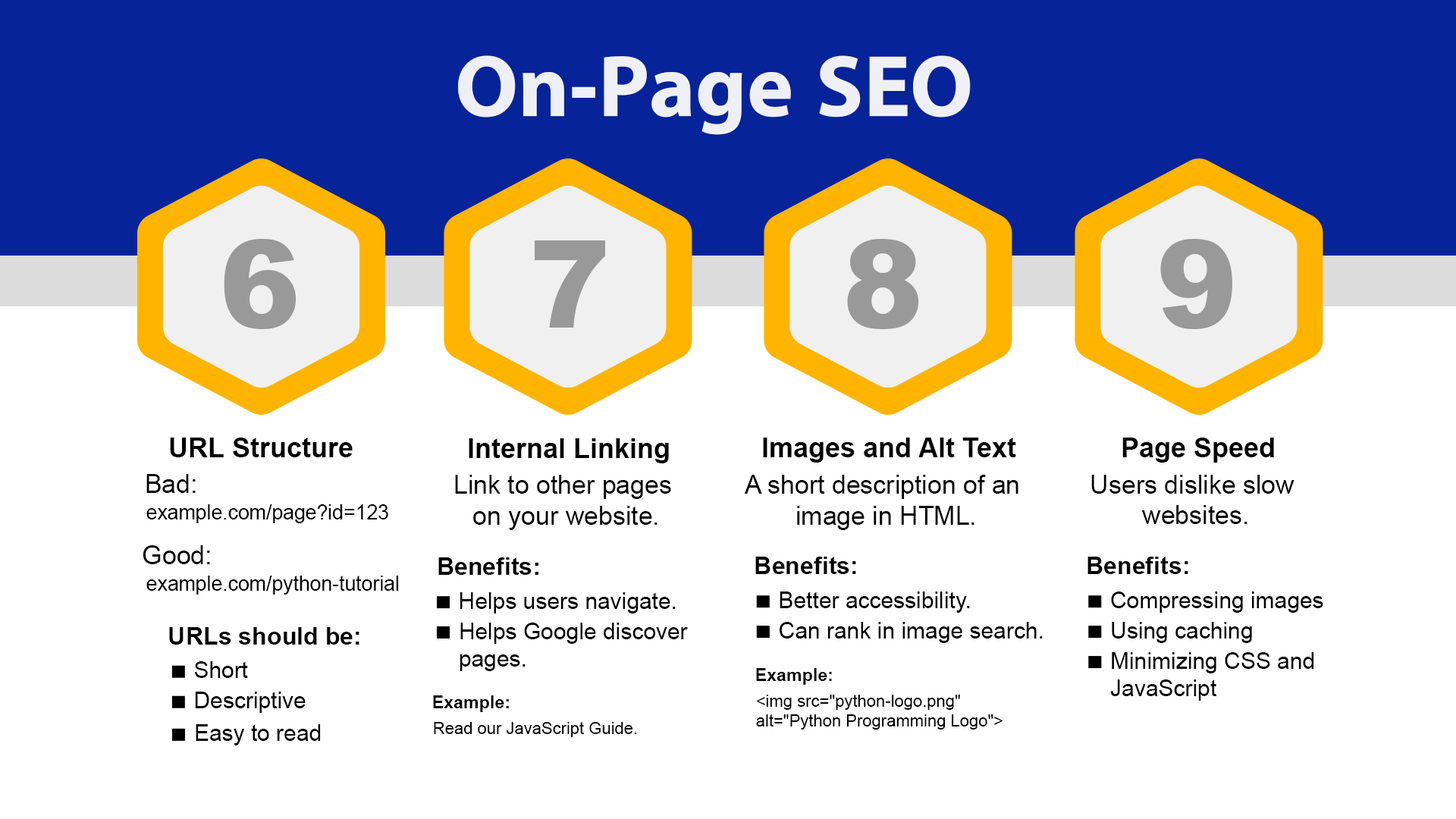
<style>
.page{position:relative;width:1456px;height:819px;background:#ffffff}
.page>*{position:absolute;margin:0}
.t1{font:88px "iKampuchea001_O'Chrov";color:#ffffff}
.t2{font:121px "Arial-Black";color:#999999}
.t3{font:27.3px "Arial-BoldMT";color:#000000}
.t4{font:25.8px "ArialMT";color:#000000}
.t5{font:25.7px "ArialMT";color:#000000}
.t6{font:20.3px "ArialMT";color:#000000}
.t7{font:24.2px "Arial-BoldMT";color:#000000}
.t8{font:23.8px "Arial-BoldMT";color:#000000}
.t9{font:22.7px "ArialMT";color:#000000}
.t10{font:24.3px "Arial-BoldMT";color:#000000}
.t11{font:22.8px "ArialMT";color:#000000}
.t12{font:17.6px "Arial-BoldMT";color:#000000}
.t13{font:16.7px "ArialMT";color:#000000}
.t14{font:22.9px "ArialMT";color:#000000}
</style>
<div class="page">
<p class="t1" style="left:458px;top:55px;width:513px;height:80px;opacity:0.9">On-Page SEO</p>
<p class="t2" style="left:224px;top:239px;width:73px;height:90px">6</p>
<p class="t2" style="left:535px;top:240px;width:70px;height:88px">7</p>
<p class="t2" style="left:847px;top:239px;width:72px;height:90px">8</p>
<p class="t2" style="left:1160px;top:239px;width:72px;height:90px">9</p>
<p class="t3" style="left:170px;top:438px;width:183px;height:19px">URL Structure</p>
<p class="t3" style="left:763px;top:438px;width:253px;height:25px">Images and Alt Text</p>
<p class="t3" style="left:1122px;top:438px;width:152px;height:25px">Page Speed</p>
<p class="t3" style="left:469px;top:438px;width:200px;height:25px">Internal Linking</p>
<p class="t4" style="left:146px;top:474px;width:50px;height:19px">Bad:</p>
<p class="t4" style="left:455px;top:475px;width:216px;height:55px;text-align:center">Link to other pages <br>on your website.</p>
<p class="t5" style="left:744px;top:475px;width:274px;height:55px;text-align:center">A short description of an <br>image in HTML.</p>
<p class="t5" style="left:1091px;top:475px;width:203px;height:49px;text-align:center">Users dislike slow <br>websites.</p>
<p class="t6" style="left:146px;top:504px;width:242px;height:19px">example.com/page?id=123</p>
<p class="t4" style="left:143px;top:545px;width:67px;height:19px">Good:</p>
<p class="t7" style="left:438px;top:557px;width:100px;height:18px">Benefits<span class="t8">:</span></p>
<p class="t7" style="left:755px;top:557px;width:101px;height:17px">Benefits:</p>
<p class="t7" style="left:1087px;top:557px;width:101px;height:17px">Benefits:</p>
<p class="t6" style="left:146px;top:576px;width:253px;height:19px">example.com/python-tutorial</p>
<p class="t9" style="left:460px;top:592px;width:216px;height:21px">Helps users navigate.</p>
<p class="t9" style="left:780px;top:591px;width:190px;height:22px">Better accessibility.</p>
<p class="t9" style="left:1111px;top:591px;width:212px;height:22px">Compressing images</p>
<p class="t10" style="left:169px;top:627px;width:190px;height:18px">URLs should be:</p>
<p class="t11" style="left:460px;top:623px;width:228px;height:48px">Helps Google discover <br>pages.</p>
<p class="t11" style="left:780px;top:622px;width:263px;height:21px">Can rank in image search.</p>
<p class="t11" style="left:1112px;top:622px;width:140px;height:21px">Using caching</p>
<p class="t11" style="left:1110px;top:652px;width:204px;height:49px">Minimizing CSS and <br>JavaScript</p>
<p class="t11" style="left:194px;top:661px;width:54px;height:17px">Short</p>
<p class="t12" style="left:756px;top:668px;width:76px;height:17px">Example:</p>
<p class="t11" style="left:195px;top:692px;width:111px;height:21px">Descriptive</p>
<p class="t12" style="left:433px;top:695px;width:76px;height:17px">Example:</p>
<p class="t13" style="left:756px;top:695px;width:247px;height:35px">&lt;img src="python-logo.png" <br>alt="Python Programming Logo"&gt;</p>
<p class="t14" style="left:196px;top:724px;width:125px;height:21px">Easy to read</p>
<p class="t13" style="left:434px;top:722px;width:203px;height:15px">Read our JavaScript Guide.</p>
</div>
